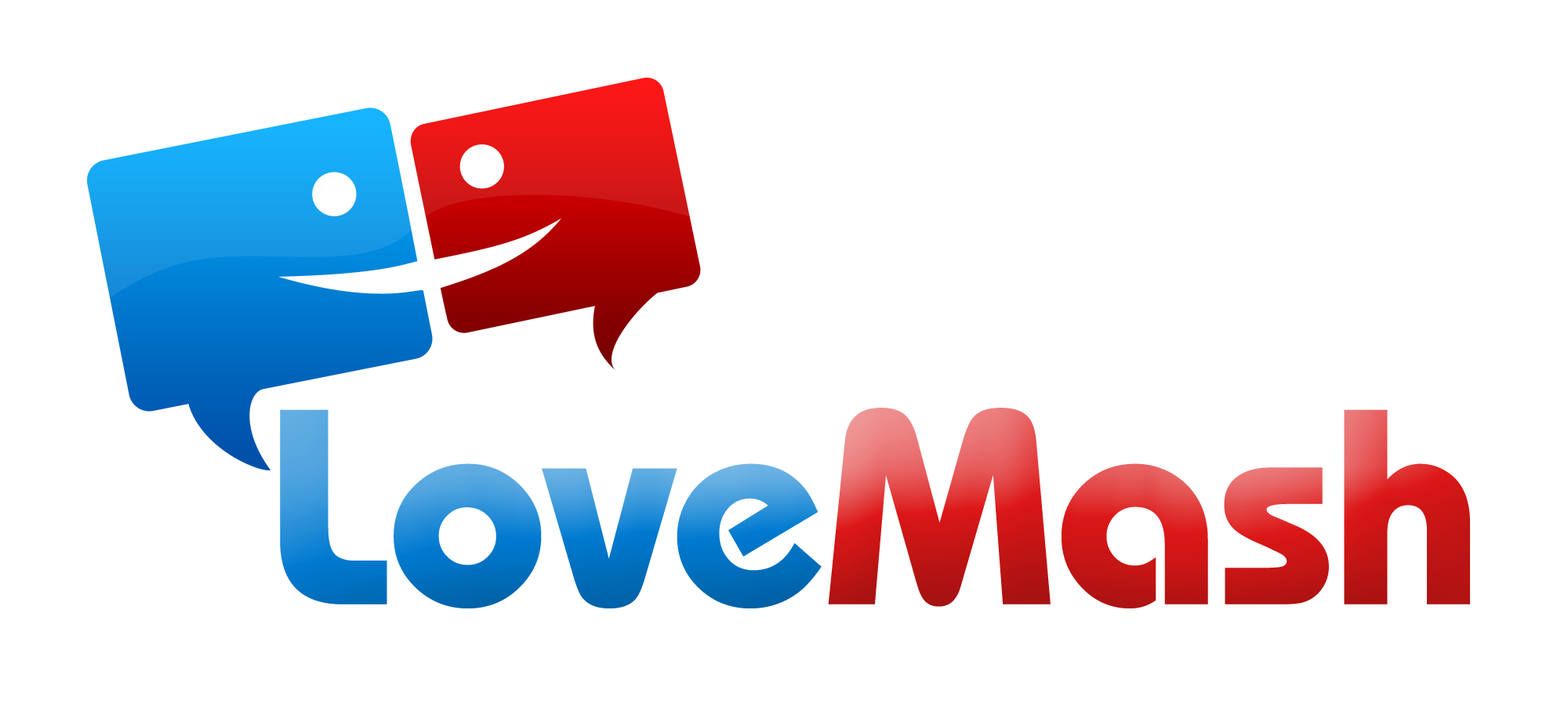
<style>
.page{position:relative;width:1568px;height:726px;background:#ffffff}
.page>*{position:absolute;margin:0}
.t1{font:291.3px "HP-Bahamas-M-Bold";letter-spacing:-0.025em}
</style>
<div class="page">
<p class="t1" style="left:280px;top:408px;width:1190px;height:200px">LoveMash</p>
</div>
